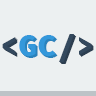
<style>
.page{position:relative;width:96px;height:96px;background:#ecf0f1}
.page>*{position:absolute;margin:0}
.t1{font:32px "SourceCodePro-Black";color:#3498db}
.t2{font:32px "SourceCodePro-Black";color:#34495e}
.t3{font:32px "SourceCodePro-Black"}
.t4{font:32px "SourceCodePro-Black";color:#2a82bc}
.t5{font:32px "SourceCodePro-Black";color:#2c3e50}
</style>
<div class="page">
<p class="t1" style="left:2px;top:34px;width:90px;height:28px"><span class="t2">&lt;</span>GC<span class="t2">/&gt;</span></p>
<p class="t3" style="left:3px;top:35px;width:90px;height:28px">&lt;GC/&gt;</p>
<p class="t4" style="left:4px;top:36px;width:90px;height:28px"><span class="t5">&lt;</span>GC<span class="t5">/&gt;</span></p>
</div>
